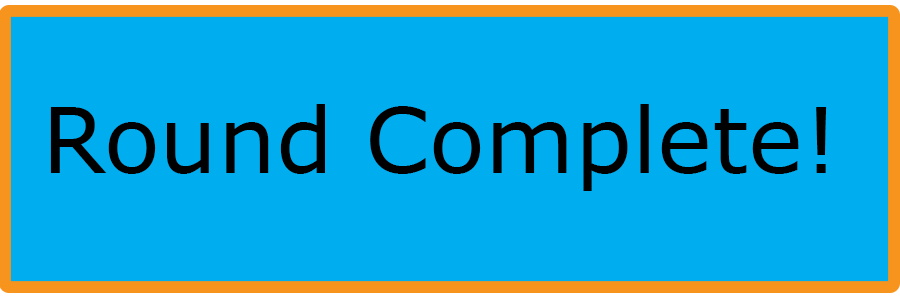
<style>
.page{position:relative;width:900px;height:300px;background:#00aeef}
.page>*{position:absolute;margin:0}
.t1{font:91.4px "Verdana";color:#000000}
</style>
<div class="page">
<p class="t1" style="left:50px;top:104px;width:777px;height:87px">Round Complete!</p>
</div>
